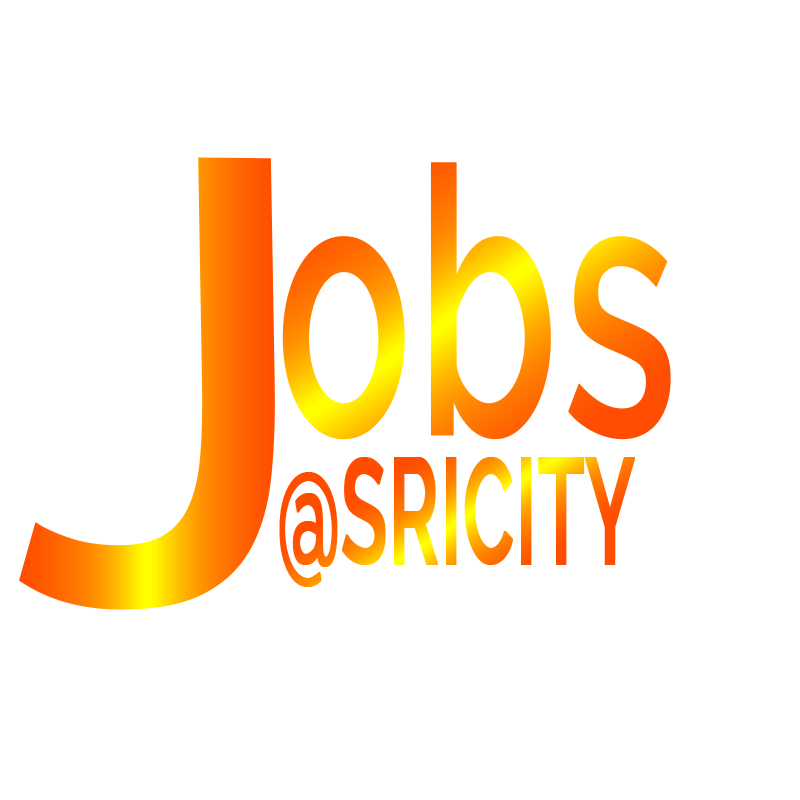
<style>
.page{position:relative;width:800px;height:800px;background:#ffffff}
.page>*{position:absolute;margin:0}
.t1{font:628px "Raleway-SemiBold";font-weight:bold}
.t2{font:373.4px "Raleway-SemiBold";font-weight:bold;scale:0.6 1}
.t3{font:149.7px "Raleway-SemiBold";font-weight:bold;scale:0.5 1}
</style>
<div class="page">
<p class="t1" style="left:19px;top:157px;width:256px;height:453px;rotate:1deg">J</p>
<p class="t2" style="left:282px;top:162px;width:389px;height:278px">obs</p>
<p class="t3" style="left:279px;top:457px;width:356px;height:130px">@SRICITY</p>
</div>
